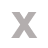
<style>
.page{position:relative;width:48px;height:48px;background:#ffffff}
.page>*{position:absolute;margin:0}
.t1{font:48px "Arial-BoldMT";color:#b3aeae}
</style>
<div class="page">
<p class="t1" style="left:11px;top:12px;width:27px;height:26px">x</p>
</div>
